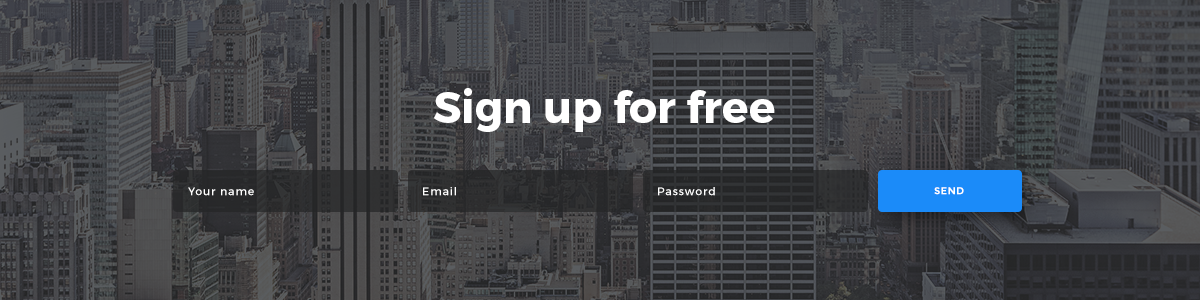
<style>
.page{position:relative;width:1200px;height:300px}
.page>*{position:absolute;margin:0}
.t1{font:44px "Montserrat-Bold";color:#ffffff}
.t2{font:11px "Montserrat-Regular";letter-spacing:0.08em;color:#ffffff}
.t3{font:10px "Montserrat-Bold";letter-spacing:0.04em;color:#ffffff;text-transform:uppercase}
</style>
<div class="page">
<p class="t1" style="left:433px;top:88px;width:342px;height:44px">Sign up for free</p>
<p class="t2" style="left:188px;top:187px;width:66px;height:9px">Your name</p>
<p class="t2" style="left:423px;top:187px;width:33px;height:9px">Email</p>
<p class="t2" style="left:658px;top:187px;width:57px;height:9px">Password</p>
<p class="t3" style="left:934px;top:187px;width:30px;height:8px">send</p>
</div>
